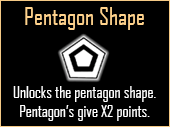
<style>
.page{position:relative;width:170px;height:127px;background:#000000}
.page>*{position:absolute;margin:0}
.t1{font:24px "AgencyFB-Reg";color:#ffd28c}
.t2{font:16px "AgencyFB-Reg";color:#ffffff}
</style>
<div class="page">
<p class="t1" style="left:25px;top:7px;width:119px;height:23px">Pentagon Shape</p>
<p class="t2" style="left:13px;top:86px;width:143px;height:35px;text-align:center">Unlocks the pentagon shape. Pentagon’s give X2 points.</p>
</div>
